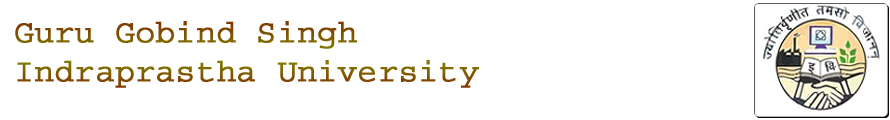
<style>
.page{position:relative;width:890px;height:120px;background:#ffffff}
.page>*{position:absolute;margin:0}
.t1{font:32.2px "Courier";color:#805801;font-weight:bold}
</style>
<div class="page">
<p class="t1" style="left:15px;top:21px;width:464px;height:67px">Guru Gobind Singh<br>Indraprastha University</p>
</div>
